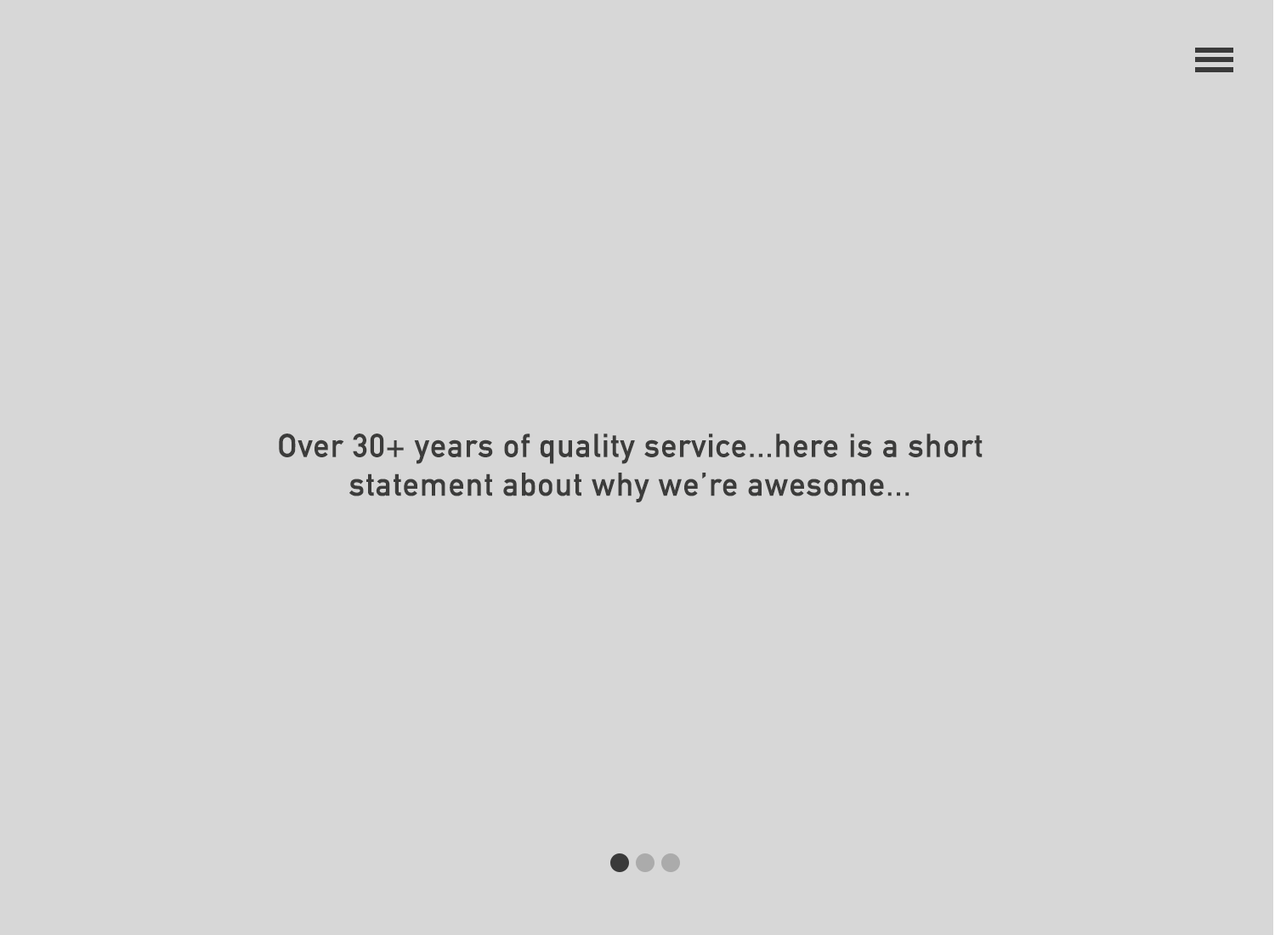
<style>
.page{position:relative;width:1275px;height:935px;background:#d7d7d7}
.page>*{position:absolute;margin:0}
.t1{font:32.3px "DINAlternate-Bold";color:#3c3c3b;font-weight:bold}
</style>
<div class="page">
<p class="t1" style="left:279px;top:434px;width:704px;height:68px;text-align:center">Over 30+ years of quality service...here is a short<br>statement about why we’re awesome...</p>
</div>
